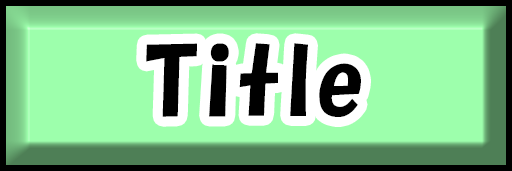
<style>
.page{position:relative;width:512px;height:171px;background:#9dffac}
.page>*{position:absolute;margin:0}
.t1{font:90px "HGPSoeiKakupoptai";letter-spacing:0.08em;color:#000000}
</style>
<div class="page">
<p class="t1" style="left:146px;top:43px;width:215px;height:74px">Title</p>
</div>
